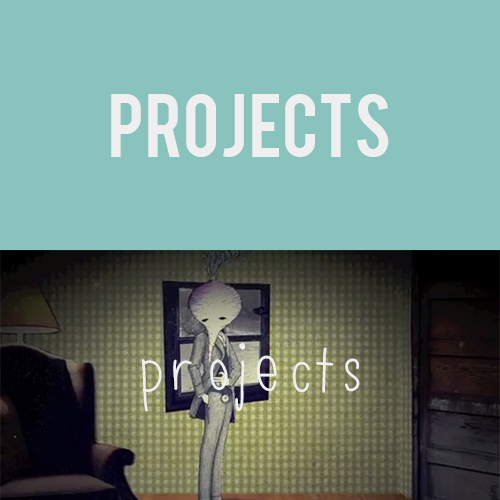
<style>
.page{position:relative;width:500px;height:500px;background:#88c3bd}
.page>*{position:absolute;margin:0}
.t1{font:70px "Bebas";color:#efefef}
.t2{font:70px "ElsieTallnSkinny";color:#efefef}
</style>
<div class="page">
<p class="t1" style="left:111px;top:94px;width:278px;height:63px">projects</p>
<p class="t2" style="left:142px;top:343px;width:218px;height:69px">projects</p>
</div>
